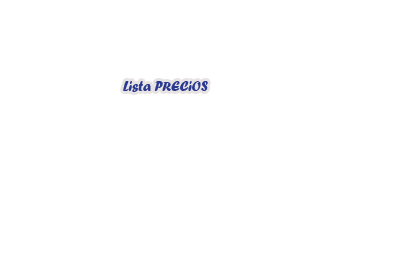
<style>
.page{position:relative;width:399px;height:266px;background:#ffffff}
.page>*{position:absolute;margin:0}
.t1{font:14px "ForteMT";color:#2a3990}
</style>
<div class="page">
<p class="t1" style="left:123px;top:81px;width:85px;height:11px">Lista PRECiOS</p>
</div>
